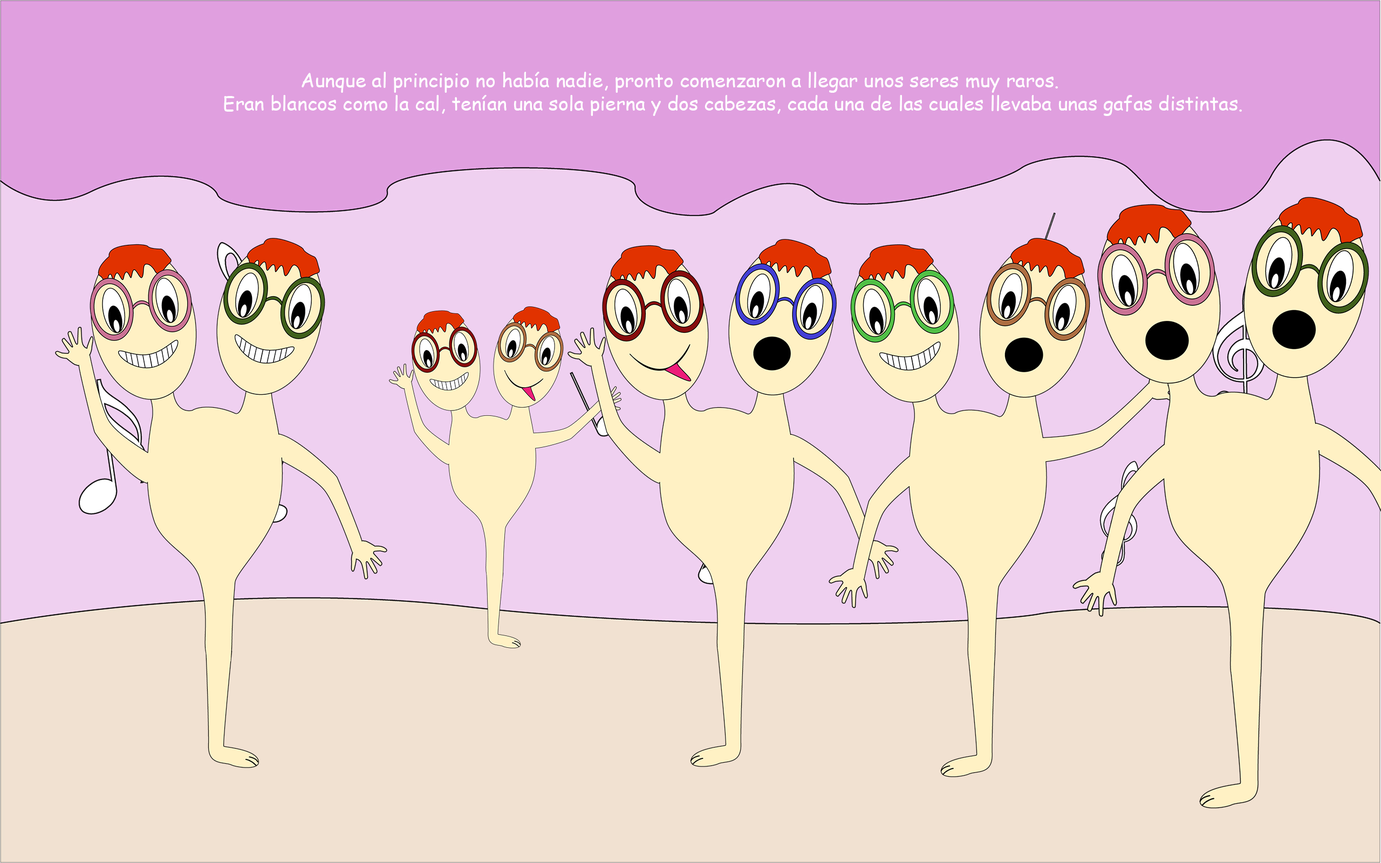
<style>
.page{position:relative;width:1381px;height:863px;background:#f1e1d1}
.page>*{position:absolute;margin:0}
.t1{font:19.4px "ComicSansMS";color:#ffffff}
</style>
<div class="page">
<p class="t1" style="left:224px;top:72px;width:1018px;height:44px">Aunque al principio no había nadie, pronto comenzaron a llegar unos seres muy raros. <br>Eran blancos como la cal, tenían una sola pierna y dos cabezas, cada una de las cuales llevaba unas gafas distintas.</p>
</div>
